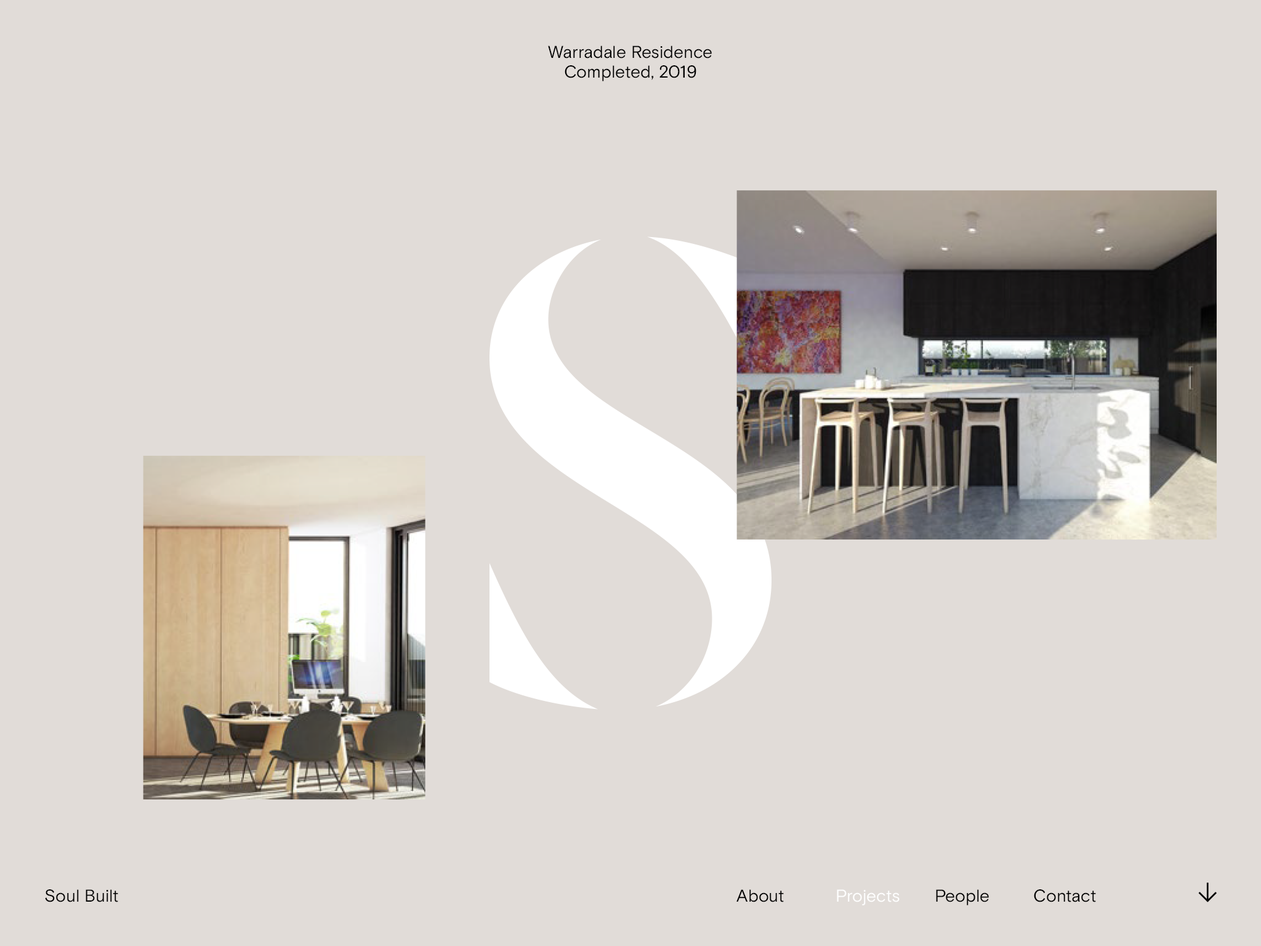
<style>
.page{position:relative;width:1261px;height:946px;background:#e1dcd8}
.page>*{position:absolute;margin:0}
.t1{font:17.2px "BasisGrotesquePro";color:#000000}
.t2{font:17.2px "BasisGrotesquePro";letter-spacing:-0.049em;color:#000000}
.t3{font:17.2px "BasisGrotesquePro";letter-spacing:-0.014em;color:#000000}
.t4{font:17.2px "BasisGrotesquePro";letter-spacing:-0.021em;color:#000000}
.t5{font:17.2px "BasisGrotesquePro";letter-spacing:-0.005em;color:#000000}
.t6{font:17.2px "BasisGrotesquePro";letter-spacing:-0.008em;color:#000000}
.t7{font:17.2px "BasisGrotesquePro";letter-spacing:-0.03em;color:#000000}
.t8{font:17.2px "BasisGrotesquePro";letter-spacing:-0.013em;color:#000000}
.t9{font:17.2px "BasisGrotesquePro";letter-spacing:-0.009em;color:#000000}
.t10{font:17.2px "BasisGrotesquePro";letter-spacing:-0.018em;color:#000000}
.t11{font:17.2px "BasisGrotesquePro";letter-spacing:-0.011em;color:#000000}
.t12{font:17.2px "BasisGrotesquePro";letter-spacing:-0.015em;color:#000000}
.t13{font:17.2px "BasisGrotesquePro";letter-spacing:-0.004em;color:#000000}
.t14{font:17.2px "BasisGrotesquePro";letter-spacing:-0.036em;color:#000000}
.t15{font:17.2px "BasisGrotesquePro";letter-spacing:-0.034em;color:#000000}
.t16{font:17.2px "BasisGrotesquePro";letter-spacing:-0.007em;color:#000000}
.t17{font:17.2px "BasisGrotesquePro";letter-spacing:-0.002em;color:#000000}
.t18{font:17.2px "BasisGrotesquePro";letter-spacing:-0.025em;color:#ffffff}
.t19{font:17.2px "BasisGrotesquePro";letter-spacing:-0.023em;color:#ffffff}
.t20{font:17.2px "BasisGrotesquePro";color:#ffffff}
.t21{font:17.2px "BasisGrotesquePro";letter-spacing:-0.009em;color:#ffffff}
.t22{font:17.2px "BasisGrotesquePro";letter-spacing:-0.003em;color:#ffffff}
.t23{font:17.2px "BasisGrotesquePro";letter-spacing:-0.008em;color:#ffffff}
.t24{font:17.2px "BasisGrotesquePro";letter-spacing:-0.057em;color:#000000}
.t25{font:17.2px "BasisGrotesquePro";letter-spacing:-0.003em;color:#000000}
.t26{font:17.2px "BasisGrotesquePro";letter-spacing:-0.019em;color:#000000}
.t27{font:17.2px "BasisGrotesquePro";letter-spacing:-0.026em;color:#000000}
</style>
<div class="page">
<p class="t1" style="left:548px;top:46px;width:164px;height:12px"><span class="t2">W</span><span class="t3">a</span>r<span class="t4">r</span><span class="t5">a</span><span class="t6">d</span><span class="t3">a</span>le <span class="t7">R</span><span class="t8">e</span>s<span class="t9">i</span>de<span class="t9">n</span><span class="t6">c</span>e</p>
<p class="t1" style="left:565px;top:65px;width:131px;height:16px"><span class="t10">C</span>o<span class="t11">m</span>pl<span class="t11">e</span><span class="t12">t</span><span class="t13">e</span>d, <span class="t14">2</span><span class="t15">0</span>19</p>
<p class="t1" style="left:45px;top:889px;width:73px;height:13px">S<span class="t16">o</span>ul Built</p>
<p class="t1" style="left:736px;top:889px;width:48px;height:13px">Ab<span class="t16">o</span><span class="t17">u</span>t</p>
<p class="t18" style="left:837px;top:889px;width:63px;height:16px">P<span class="t19">r</span><span class="t20">o</span><span class="t21">j</span><span class="t22">e</span><span class="t21">c</span><span class="t23">t</span><span class="t20">s</span></p>
<p class="t1" style="left:936px;top:889px;width:53px;height:16px"><span class="t24">P</span><span class="t25">e</span>ople</p>
<p class="t26" style="left:1034px;top:889px;width:62px;height:13px">C<span class="t1">o</span><span class="t27">n</span><span class="t16">t</span><span class="t5">a</span><span class="t9">c</span><span class="t1">t</span></p>
</div>
